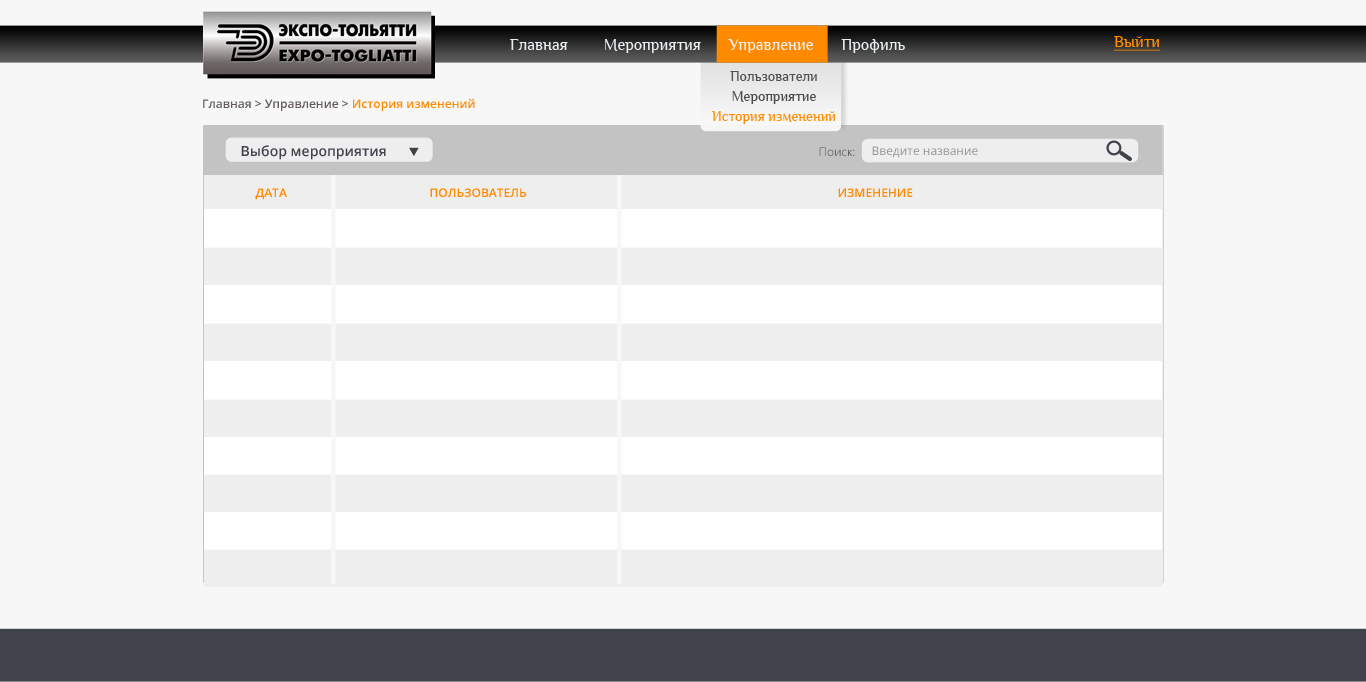
<style>
.page{position:relative;width:1366px;height:682px;background:#f7f7f7}
.page>*{position:absolute;margin:0}
.t1{font:16.5px "Philosopher";color:#e7eff1}
.t2{font:16px "Philosopher";color:#ff8a00;text-decoration:underline}
.t3{font:14.4px/20px "Philosopher";color:#ff8a00}
.t4{font:14.4px/20px "Philosopher";color:#505050}
.t5{font:14.4px/20px "Philosopher";color:#4b4b4b}
.t6{font:12px "OpenSans-Semibold";color:#615a59}
.t7{font:12px "OpenSans-Semibold";color:#ff8a00}
.t8{font:14px "OpenSans-Semibold";color:#40434a}
.t9{font:12px "OpenSans-Light";color:#40434a}
.t10{font:12px "OpenSans";color:#959494}
.t11{font:12px "OpenSans-Semibold";color:#ff8a00;text-transform:uppercase}
</style>
<div class="page">
<p class="t1" style="left:510px;top:39px;width:395px;height:14px">Главная         Мероприятия       Управление       Профиль</p>
<p class="t2" style="left:1114px;top:36px;width:47px;height:15px">Выйти</p>
<p class="t3" style="left:712px;top:71px;width:123px;height:53px;text-align:center"><span class="t4">Пользователи<br></span><span class="t5">Мероприятие<br></span>История изменений</p>
<p class="t6" style="left:203px;top:98px;width:272px;height:13px">Главная &gt; Управление &gt; <span class="t7">История изменений</span></p>
<p class="t8" style="left:241px;top:145px;width:145px;height:15px">Выбор мероприятия</p>
<p class="t9" style="left:819px;top:147px;width:36px;height:9px">Поиск:</p>
<p class="t10" style="left:872px;top:146px;width:106px;height:12px">Введите название</p>
<p class="t11" style="left:255px;top:188px;width:32px;height:12px">дата</p>
<p class="t11" style="left:430px;top:188px;width:97px;height:9px">Пользователь</p>
<p class="t11" style="left:838px;top:188px;width:75px;height:9px">Изменение</p>
</div>
